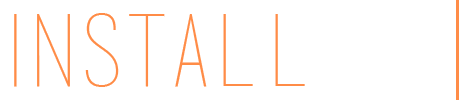
<style>
.page{position:relative;width:459px;height:100px;background:#ffffff}
.page>*{position:absolute;margin:0}
.t1{font:100px "basictitlefont";color:#ff8c47}
</style>
<div class="page">
<p class="t1" style="left:14px;top:13px;width:291px;height:74px">install</p>
</div>
